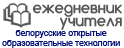
<style>
.page{position:relative;width:124px;height:48px;background:#ffffff}
.page>*{position:absolute;margin:0}
.t1{font:15.2px/13.5px "Comfortaa-Regular";color:#555555;font-weight:bold;scale:0.94 1}
.t2{font:8.2px/10.3px "ArialMT";color:#020d76;scale:1.05 1}
</style>
<div class="page">
<p class="t1" style="left:32px;top:4px;width:90px;height:26px;text-align:right">ежедневник<br>учителя</p>
<p class="t2" style="left:2px;top:30px;width:118px;height:18px;text-align:center">белорусские открытые<br>образовательные технологии</p>
</div>
